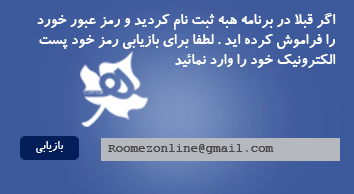
<style>
.page{position:relative;width:354px;height:194px}
.page>*{position:absolute;margin:0}
.t1{font:16.7px "BKoodakBold";color:#ffffff}
.t2{font:12.5px "BKoodakBold";color:#ffffff}
.t3{font:12.5px "MiriamFixed";color:#494747}
</style>
<div class="page">
<p class="t1" style="left:37px;top:13px;width:299px;height:55px">اگر قبلا در برنامه هبه ثبت نام کرديد و رمز عبور خورد را فراموش کرده ايد . لطفا براي بازيابي رمز خود پست الکترونيک خود را وارد نمائيد</p>
<p class="t2" style="left:36px;top:141px;width:28px;height:12px">بازيابي</p>
<p class="t3" style="left:108px;top:144px;width:166px;height:10px">Roomezonline@gmail.com</p>
</div>
